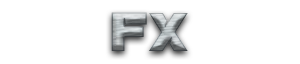
<style>
.page{position:relative;width:300px;height:64px;background:#ffffff}
.page>*{position:absolute;margin:0}
.t1{font:60px "BananaBrick"}
</style>
<div class="page">
<p class="t1" style="left:111px;top:12px;width:77px;height:39px">Fx</p>
</div>
